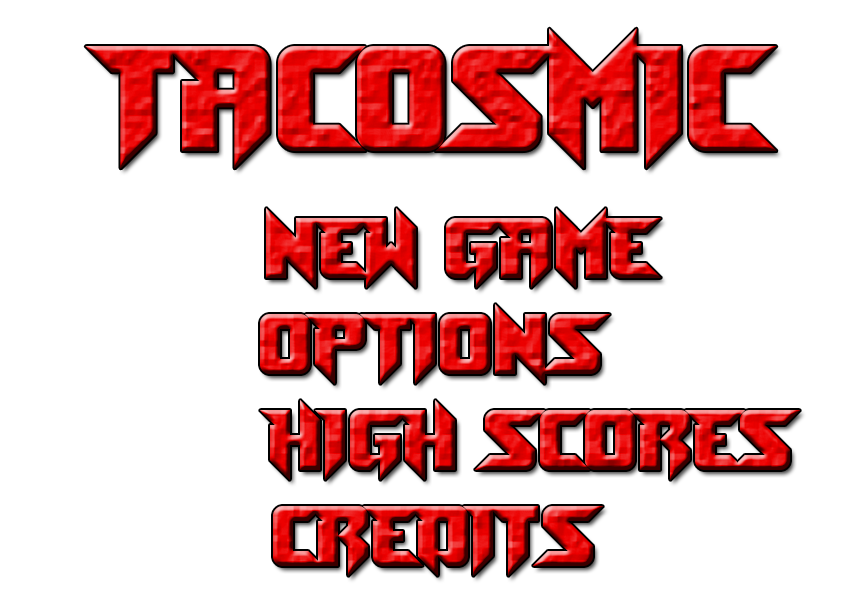
<style>
.page{position:relative;width:842px;height:595px;background:#ffffff}
.page>*{position:absolute;margin:0}
.t1{font:140px "Toe-the-Lineless"}
.t2{font:80px "Toe-the-Lineless"}
.t3{font:90px "Toe-the-Lineless"}
</style>
<div class="page">
<p class="t1" style="left:85px;top:28px;width:692px;height:141px">TACOSMIC</p>
<p class="t2" style="left:260px;top:208px;width:540px;height:368px;text-align:center"><span class="t3">  </span>NEW GAME<br>OPTIONS<br>        HIGH SCORES<br>          CREDITS</p>
</div>
